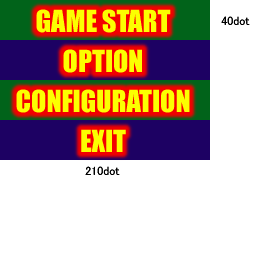
<style>
.page{position:relative;width:256px;height:256px;background:#ffffff}
.page>*{position:absolute;margin:0}
.t1{font:28px/40px "Impact";color:#fcff00}
.t2{font:12px "MS-PGothic";color:#000000}
</style>
<div class="page">
<p class="t1" style="left:16px;top:9px;width:174px;height:143px;text-align:center">GAME START<br>OPTION<br>CONFIGURATION<br>EXIT</p>
<p class="t2" style="left:221px;top:16px;width:29px;height:9px">40dot</p>
<p class="t2" style="left:85px;top:166px;width:35px;height:9px">210dot</p>
</div>
